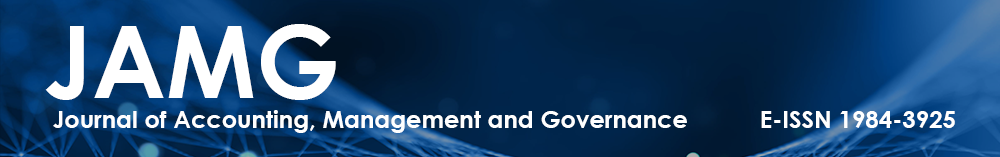
<style>
.page{position:relative;width:1000px;height:157px}
.page>*{position:absolute;margin:0}
.t1{font:100px "CenturyGothic-Bold";color:#ffffff}
.t2{font:24px "CenturyGothic-Bold";color:#ffffff}
</style>
<div class="page">
<p class="t1" style="left:45px;top:24px;width:291px;height:76px">JAMG</p>
<p class="t2" style="left:53px;top:110px;width:634px;height:23px">Journal of Accounting, Management and Governance</p>
<p class="t2" style="left:761px;top:111px;width:194px;height:17px">E-ISSN 1984-3925</p>
</div>
